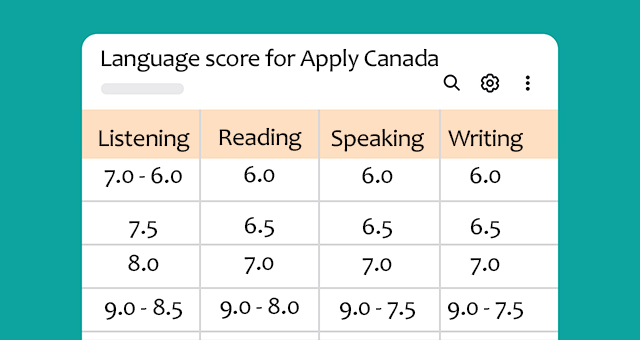
<style>
.page{position:relative;width:640px;height:340px;background:#ffffff}
.page>*{position:absolute;margin:0}
.t1{font:24.6px "Candara";letter-spacing:-0.02em;color:#000000}
</style>
<div class="page">
<p class="t1" style="left:101px;top:48px;width:338px;height:24px">Language score for Apply Canada</p>
<p class="t1" style="left:99px;top:129px;width:91px;height:23px">Listening</p>
<p class="t1" style="left:219px;top:127px;width:83px;height:24px">Reading</p>
<p class="t1" style="left:331px;top:128px;width:93px;height:24px">Speaking</p>
<p class="t1" style="left:448px;top:129px;width:75px;height:23px">Writing</p>
<p class="t1" style="left:104px;top:166px;width:78px;height:22px">6.0 - 7.0</p>
<p class="t1" style="left:244px;top:165px;width:31px;height:18px">6.0</p>
<p class="t1" style="left:362px;top:166px;width:31px;height:18px">6.0</p>
<p class="t1" style="left:470px;top:166px;width:31px;height:18px">6.0</p>
<p class="t1" style="left:129px;top:221px;width:29px;height:18px">7.5</p>
<p class="t1" style="left:244px;top:217px;width:31px;height:21px">6.5</p>
<p class="t1" style="left:362px;top:218px;width:31px;height:21px">6.5</p>
<p class="t1" style="left:470px;top:218px;width:31px;height:21px">6.5</p>
<p class="t1" style="left:128px;top:254px;width:31px;height:18px">8.0</p>
<p class="t1" style="left:244px;top:257px;width:30px;height:18px">7.0</p>
<p class="t1" style="left:362px;top:258px;width:30px;height:18px">7.0</p>
<p class="t1" style="left:470px;top:258px;width:30px;height:18px">7.0</p>
<p class="t1" style="left:104px;top:298px;width:79px;height:22px">8.5 - 9.0</p>
<p class="t1" style="left:220px;top:297px;width:79px;height:22px">8.0 - 9.0</p>
<p class="t1" style="left:339px;top:302px;width:77px;height:18px">7.5 - 9.0</p>
<p class="t1" style="left:447px;top:302px;width:77px;height:18px">7.5 - 9.0</p>
</div>
